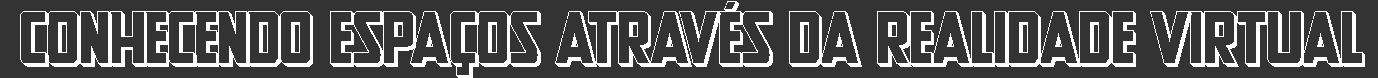
<style>
.page{position:relative;width:1378px;height:78px;background:#333333}
.page>*{position:absolute;margin:0}
.t1{font:72.1px "NewComicTitle3D";letter-spacing:-0.065em;color:#ffffff}
</style>
<div class="page">
<p class="t1" style="left:20px;top:1px;width:1345px;height:77px">Conhecendo Espaços através da Realidade Virtual</p>
</div>
